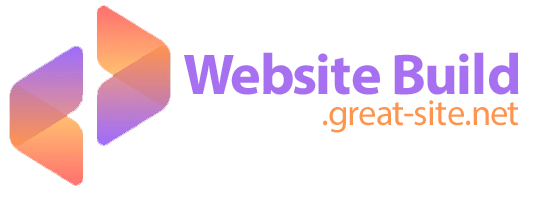
<style>
.page{position:relative;width:543px;height:197px;background:#ffffff}
.page>*{position:absolute;margin:0}
.t1{font:57.9px "MyriadPro-Bold";letter-spacing:-0.025em;color:#a770f0}
.t2{font:36.7px "MyriadPro-Regular";letter-spacing:-0.025em;color:#ff944e}
</style>
<div class="page">
<p class="t1" style="left:184px;top:52px;width:335px;height:43px">Website Build</p>
<p class="t2" style="left:323px;top:100px;width:195px;height:33px">.great-site.net</p>
</div>
